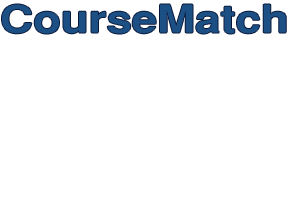
<style>
.page{position:relative;width:300px;height:200px;background:#ffffff}
.page>*{position:absolute;margin:0}
.t1{font:38px "SansSerifBold";color:#1c4f84;scale:1.2 1}
</style>
<div class="page">
<p class="t1" style="left:2px;top:4px;width:284px;height:30px">CourseMatch</p>
</div>
